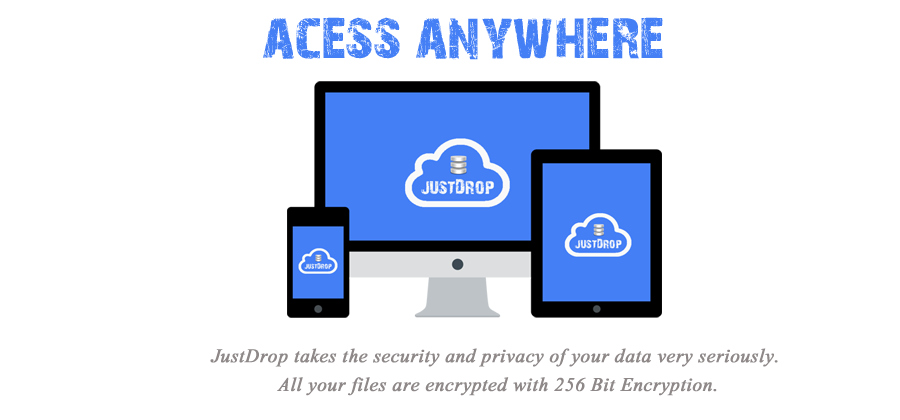
<style>
.page{position:relative;width:900px;height:420px;background:#ffffff}
.page>*{position:absolute;margin:0}
.t1{font:60px "28DaysLater";color:#447ff6}
.t2{font:24px "Aparajita-Italic";color:#8e8888;font-weight:bold}
</style>
<div class="page">
<p class="t1" style="left:263px;top:17px;width:400px;height:43px">acess anywhere</p>
<p class="t2" style="left:210px;top:348px;width:568px;height:48px;text-align:center">JustDrop takes the security and privacy of your data very seriously. <br>All your files are encrypted with 256 Bit Encryption.</p>
</div>
